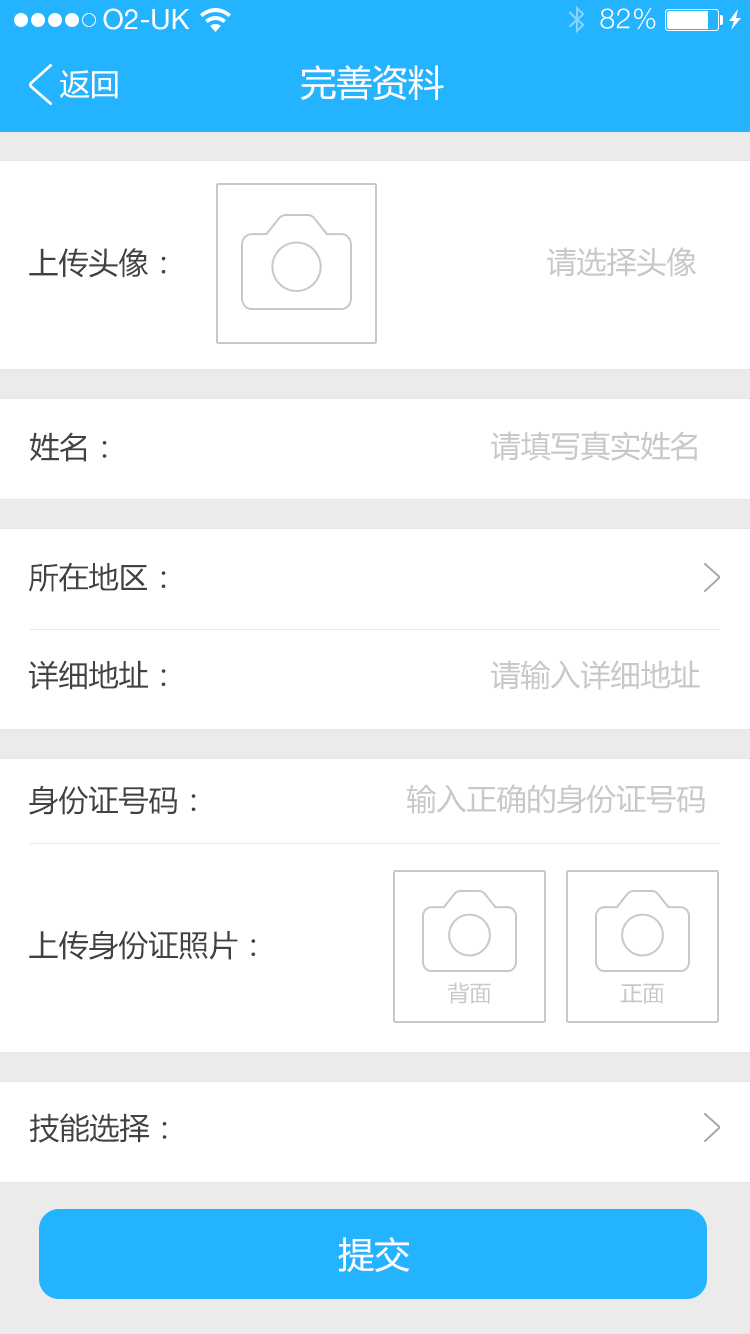
<style>
.page{position:relative;width:750px;height:1334px;background:#ffffff}
.page>*{position:absolute;margin:0}
.t1{font:36px "MicrosoftYaHei";color:#ffffff}
.t2{font:30px "MicrosoftYaHei";color:#ffffff}
.t3{font:30px "MicrosoftYaHei";color:#424242}
.t4{font:30px "MicrosoftYaHei";color:#c8c8c8}
.t5{font:22px "MicrosoftYaHei";color:#c8c8c8}
</style>
<div class="page">
<p class="t1" style="left:301px;top:65px;width:143px;height:36px">完善资料</p>
<p class="t2" style="left:60px;top:70px;width:58px;height:29px">返回</p>
<p class="t3" style="left:29px;top:248px;width:137px;height:30px">上传头像：</p>
<p class="t4" style="left:547px;top:247px;width:149px;height:30px">请选择头像</p>
<p class="t3" style="left:30px;top:432px;width:77px;height:30px">姓名：</p>
<p class="t4" style="left:491px;top:431px;width:206px;height:30px">请填写真实姓名</p>
<p class="t3" style="left:28px;top:562px;width:138px;height:30px">所在地区：</p>
<p class="t3" style="left:29px;top:660px;width:137px;height:30px">详细地址：</p>
<p class="t4" style="left:491px;top:660px;width:209px;height:30px">请输入详细地址</p>
<p class="t3" style="left:29px;top:785px;width:167px;height:30px">身份证号码：</p>
<p class="t4" style="left:407px;top:784px;width:298px;height:30px">输入正确的身份证号码</p>
<p class="t3" style="left:29px;top:930px;width:227px;height:30px">上传身份证照片：</p>
<p class="t5" style="left:448px;top:982px;width:43px;height:22px">背面</p>
<p class="t5" style="left:620px;top:983px;width:44px;height:21px">正面</p>
<p class="t3" style="left:29px;top:1113px;width:138px;height:30px">技能选择：</p>
<p class="t1" style="left:338px;top:1237px;width:72px;height:35px">提交</p>
</div>
